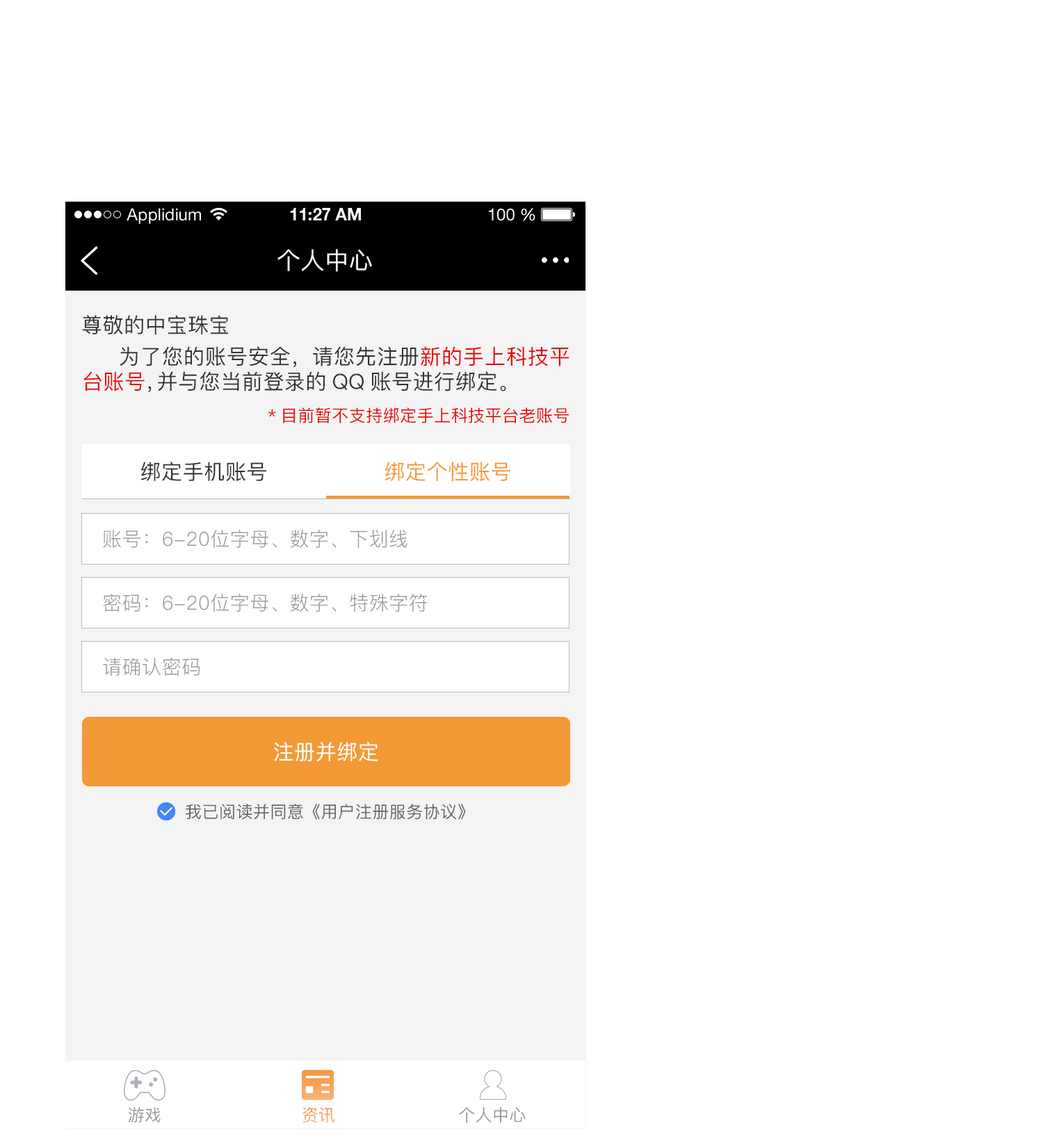
<style>
.page{position:relative;width:1043px;height:1143px;background:#ffffff}
.page>*{position:absolute;margin:0}
.t1{font:16.7px "HelveticaNeueLTStd-Roman";color:#ffffff}
.t2{font:16.7px "HelveticaNeueLTStd-Bd";color:#ffffff}
.t3{font:23.6px "PingFang-SC-Medium";letter-spacing:0.02em;color:#ffffff}
.t4{font:20.9px "PingFang-SC-Medium";letter-spacing:0.02em;color:#333333}
.t5{font:20.9px "PingFang-SC-Medium";letter-spacing:0.02em;color:#e60505}
.t6{font:16.7px "PingFang-SC-Medium";letter-spacing:0.02em;color:#e60505}
.t7{font:20.9px "PingFang-SC-Medium";letter-spacing:0.02em;color:#f39a36}
.t8{font:19.5px "PingFang-SC-Regular";letter-spacing:0.02em;color:#999999}
.t9{font:20.9px "PingFang-SC-Medium";letter-spacing:0.02em;color:#ffffff}
.t10{font:16.7px "PingFang-SC-Medium";letter-spacing:0.02em;color:#666666}
.t11{font:16.7px "PingFang-SC-Medium";letter-spacing:0.02em;color:#999999}
.t12{font:16.7px "PingFang-SC-Medium";letter-spacing:0.02em;color:#f8a45c}
</style>
<div class="page">
<p class="t1" style="left:127px;top:208px;width:74px;height:16px">Applidium</p>
<p class="t2" style="left:290px;top:208px;width:71px;height:12px">11:27 AM</p>
<p class="t1" style="left:489px;top:208px;width:46px;height:13px">100 %</p>
<p class="t3" style="left:277px;top:249px;width:95px;height:23px">个人中心</p>
<p class="t4" style="left:82px;top:315px;width:146px;height:20px">尊敬的中宝珠宝</p>
<p class="t4" style="left:83px;top:346px;width:487px;height:47px;text-align:justify">为了您的账号安全，请您先注册<span class="t5">新的手上科技平台账号</span>，并与您当前登录的QQ账号进行绑定。</p>
<p class="t6" style="left:268px;top:407px;width:302px;height:16px">*目前暂不支持绑定手上科技平台老账号</p>
<p class="t4" style="left:141px;top:462px;width:125px;height:19px">绑定手机账号</p>
<p class="t7" style="left:385px;top:462px;width:125px;height:19px">绑定个性账号</p>
<p class="t8" style="left:103px;top:530px;width:304px;height:18px">账号：6-20位字母、数字、下划线</p>
<p class="t8" style="left:103px;top:594px;width:324px;height:18px">密码：6-20位字母、数字、特殊字符</p>
<p class="t8" style="left:103px;top:658px;width:97px;height:18px">请确认密码</p>
<p class="t9" style="left:274px;top:742px;width:104px;height:19px">注册并绑定</p>
<p class="t10" style="left:186px;top:804px;width:280px;height:16px">我已阅读并同意《用户注册服务协议》</p>
<p class="t11" style="left:128px;top:1107px;width:33px;height:16px">游戏</p>
<p class="t12" style="left:302px;top:1107px;width:33px;height:16px">资讯</p>
<p class="t11" style="left:459px;top:1107px;width:67px;height:16px">个人中心</p>
</div>
